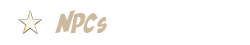
<style>
.page{position:relative;width:250px;height:45px;background:#ffffff}
.page>*{position:absolute;margin:0}
.t1{font:30px "HoustonComicsPersonalUse";color:#cdb99d}
.t2{font:24px "HoustonComicsPersonalUse";color:#cdb99d}
</style>
<div class="page">
<p class="t1" style="left:55px;top:10px;width:52px;height:24px">NPC<span class="t2">s</span></p>
</div>
